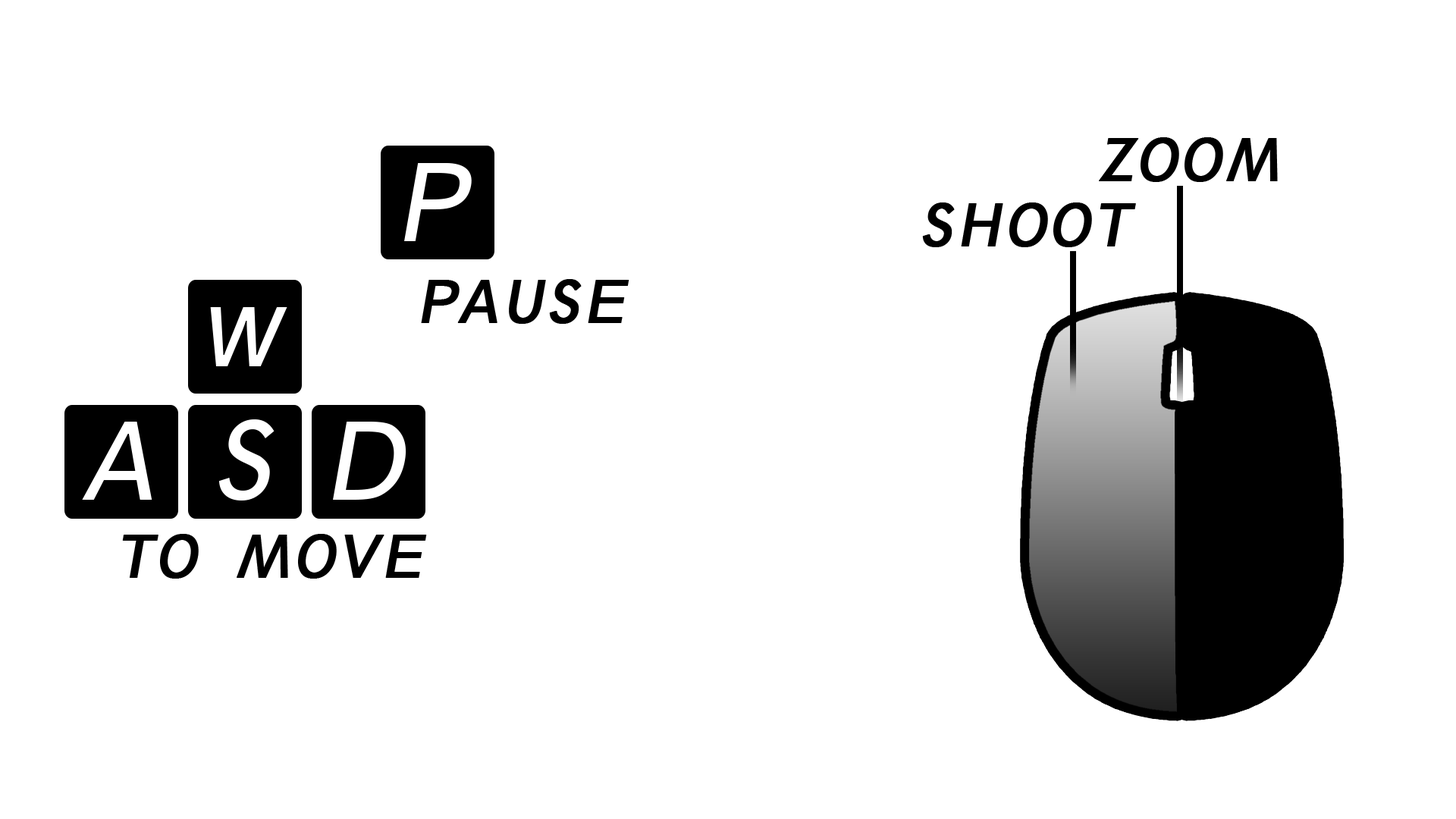
<style>
.page{position:relative;width:1456px;height:819px;background:#ffffff}
.page>*{position:absolute;margin:0}
.t1{font:54.8px "Geometric212BT-BookCondensed";letter-spacing:0.02em;color:#000000;font-weight:bold;font-style:italic}
</style>
<div class="page">
<p class="t1" style="left:1099px;top:137px;width:179px;height:45px">ZOOM</p>
<p class="t1" style="left:922px;top:202px;width:214px;height:45px">SHOOT</p>
<p class="t1" style="left:421px;top:279px;width:208px;height:45px">PAUSE</p>
<p class="t1" style="left:122px;top:534px;width:305px;height:45px">TO  MOVE</p>
</div>
